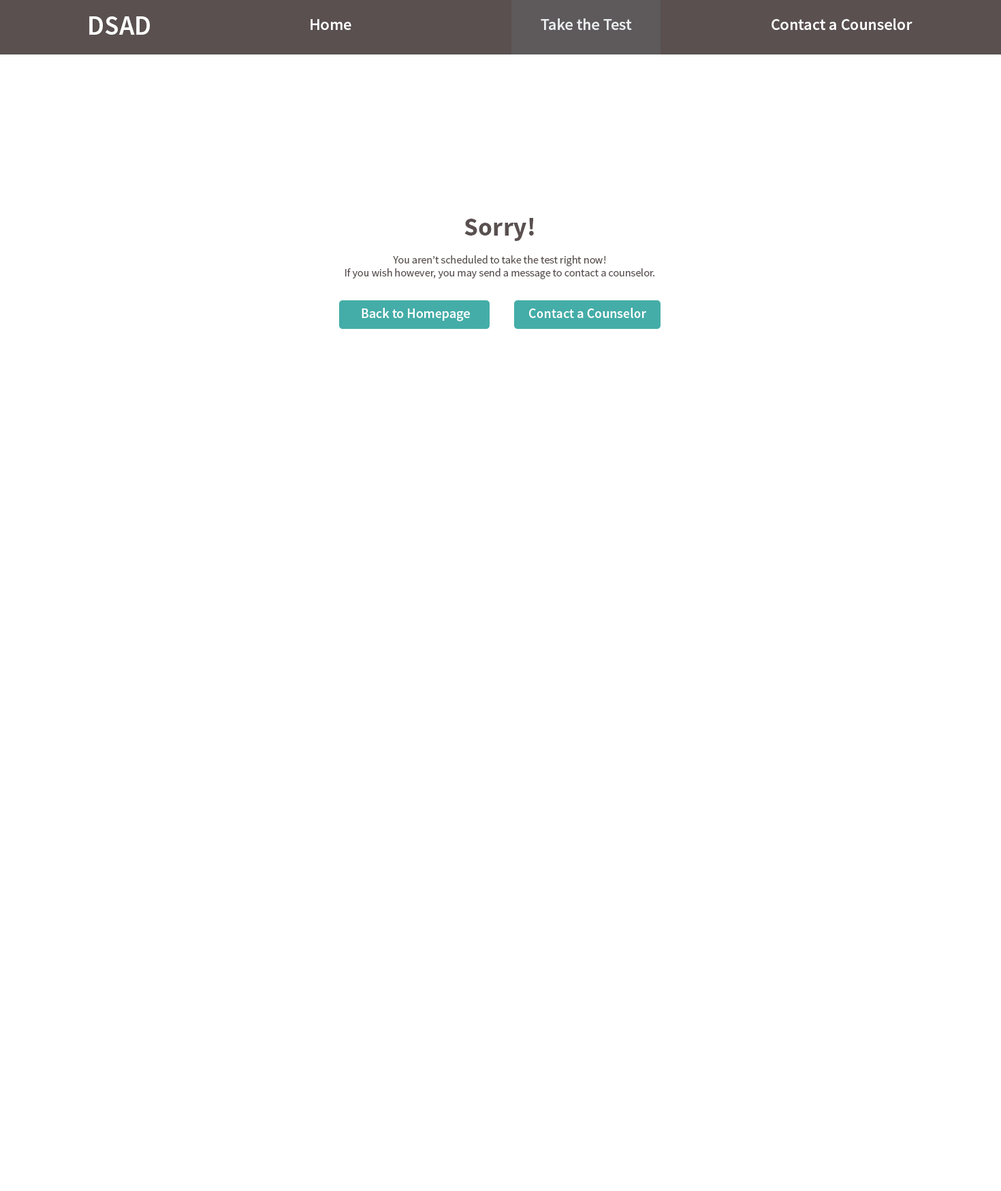
<style>
.page{position:relative;width:1001px;height:1191px;background:#ffffff}
.page>*{position:absolute;margin:0}
.t1{font:27.2px "SourceSansPro-Semibold";color:#ffffff}
.t2{font:16.3px "SourceSansPro-Semibold";color:#ffffff}
.t3{font:10.9px "SourceSansPro-Regular";color:#5a5050}
.t4{font:25.9px/32.7px "SourceSansPro-Bold";color:#5a5050}
.t5{font:13.6px "SourceSansPro-Semibold";color:#ffffff}
</style>
<div class="page">
<p class="t1" style="left:89px;top:16px;width:61px;height:19px">DSAD</p>
<p class="t2" style="left:311px;top:19px;width:40px;height:11px">Home</p>
<p class="t2" style="left:541px;top:18px;width:91px;height:12px">Take the Test</p>
<p class="t2" style="left:772px;top:18px;width:141px;height:12px">Contact a Counselor</p>
<p class="t3" style="left:345px;top:218px;width:310px;height:61px;text-align:center"><span class="t4">Sorry!<br></span>You aren’t scheduled to take the test right now!<br>If you wish however, you may send a message to contact a counselor.</p>
<p class="t5" style="left:362px;top:308px;width:108px;height:13px">Back to Homepage</p>
<p class="t5" style="left:529px;top:308px;width:117px;height:10px">Contact a Counselor</p>
</div>
